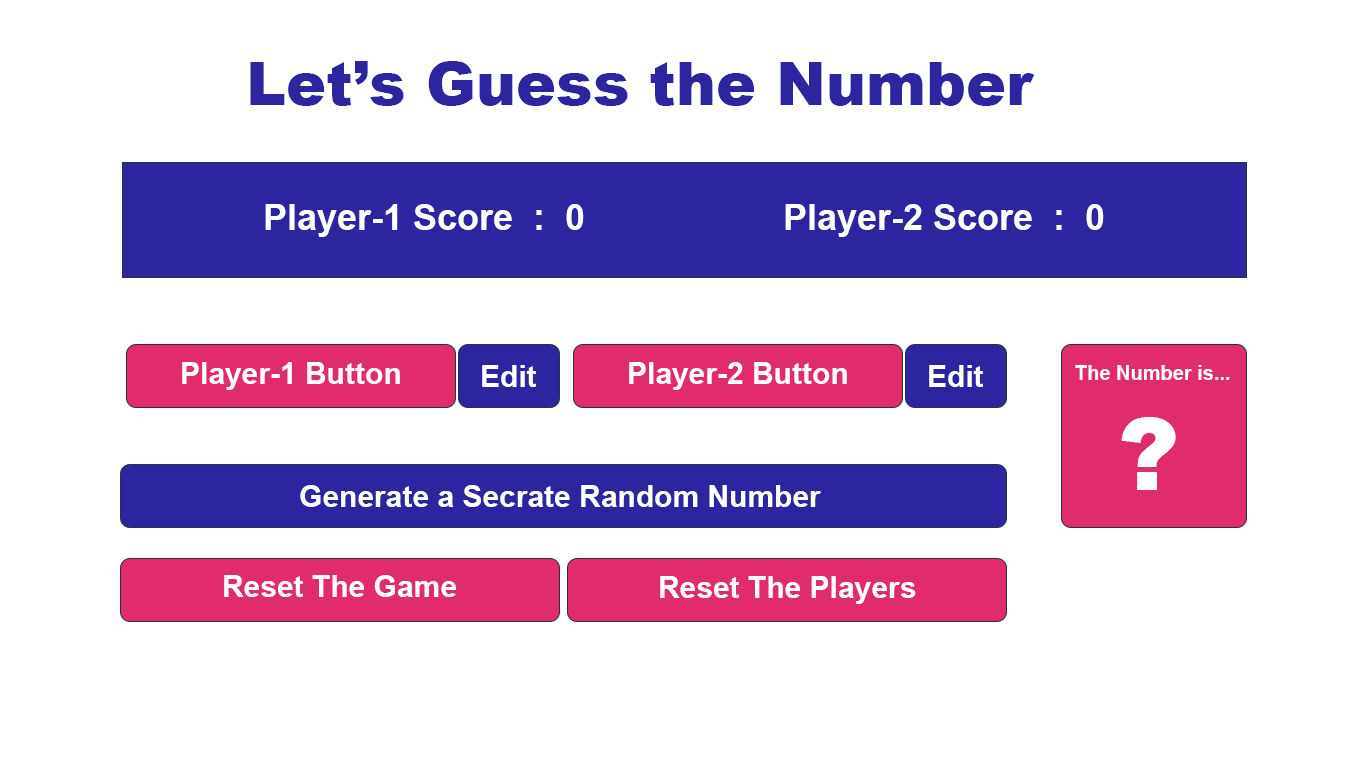
<style>
.page{position:relative;width:1366px;height:768px;background:#ffffff}
.page>*{position:absolute;margin:0}
.t1{font:60px "Arial-Black";color:#2d25a0}
.t2{font:36px "Arial-BoldMT";color:#ffffff}
.t3{font:30px "Arial-BoldMT";color:#ffffff}
.t4{font:20px "Arial-BoldMT";color:#ffffff}
.t5{font:100px "Arial-Black";color:#ffffff}
</style>
<div class="page">
<p class="t1" style="left:250px;top:61px;width:785px;height:45px">Let’s Guess the Number</p>
<p class="t2" style="left:265px;top:204px;width:319px;height:33px">Player-1 Score  :  0</p>
<p class="t2" style="left:785px;top:204px;width:319px;height:33px">Player-2 Score  :  0</p>
<p class="t3" style="left:182px;top:362px;width:218px;height:28px">Player-1 Button</p>
<p class="t3" style="left:482px;top:365px;width:55px;height:22px">Edit</p>
<p class="t3" style="left:629px;top:362px;width:218px;height:28px">Player-2 Button</p>
<p class="t3" style="left:929px;top:365px;width:55px;height:22px">Edit</p>
<p class="t4" style="left:1075px;top:365px;width:155px;height:15px">The Number is...</p>
<p class="t5" style="left:1121px;top:417px;width:55px;height:73px">?</p>
<p class="t3" style="left:300px;top:485px;width:521px;height:22px">Generate a Secrate Random Number</p>
<p class="t3" style="left:224px;top:575px;width:232px;height:22px">Reset The Game</p>
<p class="t3" style="left:660px;top:576px;width:256px;height:28px">Reset The Players</p>
</div>
